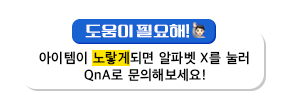
<style>
.page{position:relative;width:288px;height:96px;background:#ffffff}
.page>*{position:absolute;margin:0}
.t1{font:14px "AppleSDGothicNeo-SemiBold";letter-spacing:0.04em;color:#000000}
</style>
<div class="page">
<p class="t1" style="left:39px;top:51px;width:210px;height:31px;text-align:center">아이템이 노랗게되면 알파벳 X를 눌러<br>QnA로 문의해보세요!</p>
</div>
